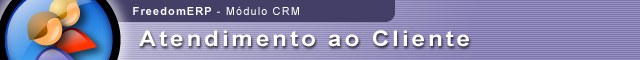
<style>
.page{position:relative;width:640px;height:60px}
.page>*{position:absolute;margin:0}
.t1{font:11px "ArialMT";letter-spacing:0.1em;color:#ffffff}
.t2{font:11px "Arial-BoldMT";letter-spacing:0.1em;color:#ffffff}
.t3{font:21.6px "Arial-BoldMT";letter-spacing:0.125em;color:#ffffff;scale:1.11 1}
</style>
<div class="page">
<p class="t1" style="left:133px;top:6px;width:166px;height:9px"><span class="t2">FreedomERP</span> - Módulo CRM</p>
<p class="t3" style="left:139px;top:30px;width:330px;height:17px">Atendimento ao Cliente</p>
</div>
